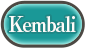
<style>
.page{position:relative;width:85px;height:48px}
.page>*{position:absolute;margin:0}
.t1{font:21px "RyuminPro-ExBold";letter-spacing:-0.08em;color:#fdfbf9;scale:0.93 1}
</style>
<div class="page">
<p class="t1" style="left:9px;top:16px;width:67px;height:16px">Kembali</p>
</div>
